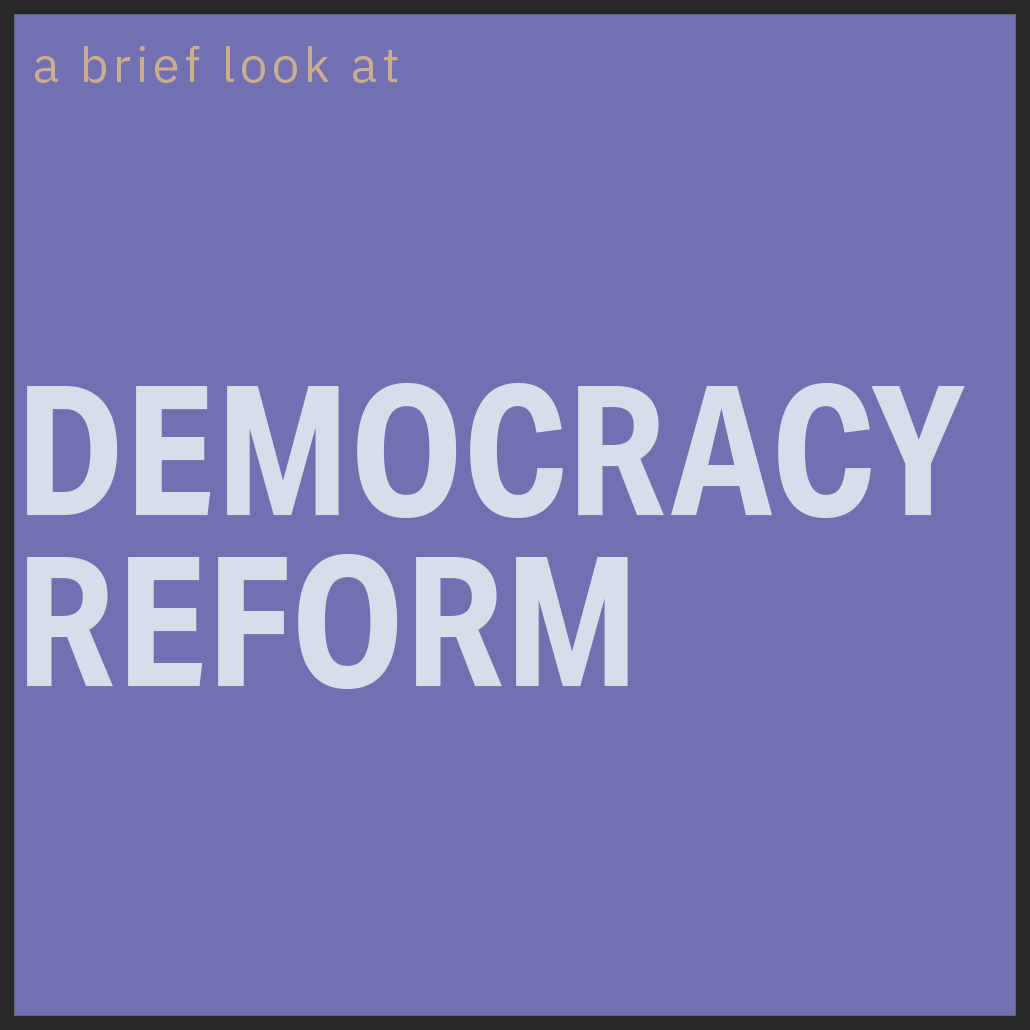
<style>
.page{position:relative;width:1030px;height:1030px;background:#7270b1}
.page>*{position:absolute;margin:0}
.t1{font:48.8px "IBMPlexSans";letter-spacing:0.1em;color:#cbaf8d}
.t2{font:180.6px/171.5px "AktivGroteskCd-Bold";color:#d8dee9}
</style>
<div class="page">
<p class="t1" style="left:35px;top:46px;width:363px;height:37px">a brief look at</p>
<p class="t2" style="left:27px;top:383px;width:938px;height:306px">DEMOCRACY<br>REFORM</p>
</div>
